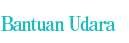
<style>
.page{position:relative;width:129px;height:43px;background:#ffffff}
.page>*{position:absolute;margin:0}
.t1{font:20px "RyuminPro-ExBold";letter-spacing:-0.08em;color:#1dbcc0;scale:0.9 1}
</style>
<div class="page">
<p class="t1" style="left:1px;top:16px;width:115px;height:15px">Bantuan Udara</p>
</div>
